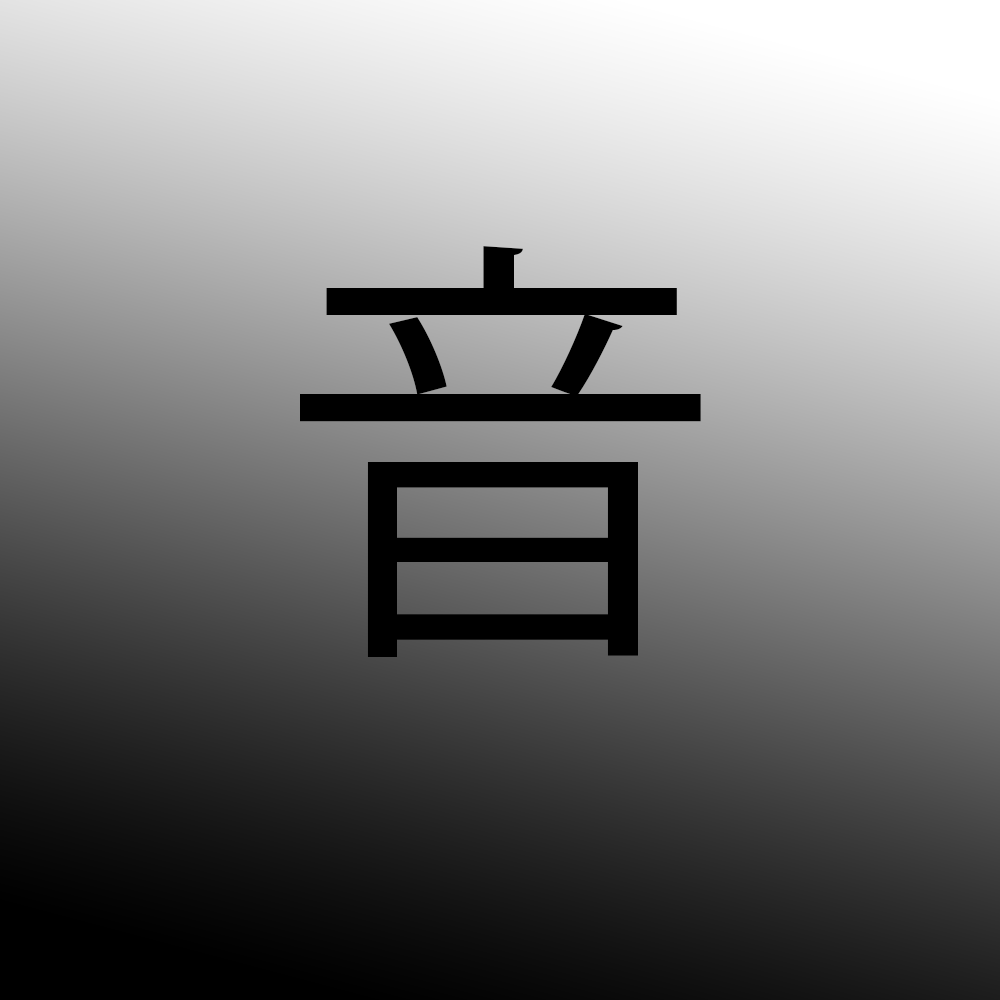
<style>
.page{position:relative;width:1000px;height:1000px}
.page>*{position:absolute;margin:0}
.t1{font:441.3px "KozGoPr6N-Regular";color:#000000}
</style>
<div class="page">
<p class="t1" style="left:300px;top:246px;width:401px;height:411px">音</p>
</div>
